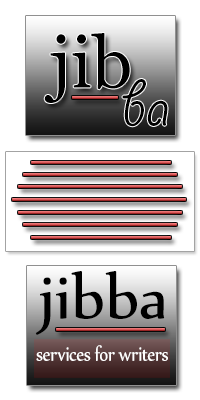
<style>
.page{position:relative;width:200px;height:400px;background:#ffffff}
.page>*{position:absolute;margin:0}
.t1{font:72px "Vani";color:#000000}
.t2{font:72px "GiddyupStd";color:#000000}
.t3{font:72px "Nyala-Regular";color:#000000}
.t4{font:23.8px "Nyala-Regular";letter-spacing:-0.025em;color:#ffffff;scale:0.85 1}
</style>
<div class="page">
<p class="t1" style="left:44px;top:33px;width:86px;height:70px">jib</p>
<p class="t2" style="left:122px;top:79px;width:46px;height:48px">ba</p>
<p class="t3" style="left:35px;top:271px;width:130px;height:64px">jibba</p>
<p class="t4" style="left:36px;top:345px;width:132px;height:16px">services for writers</p>
</div>
